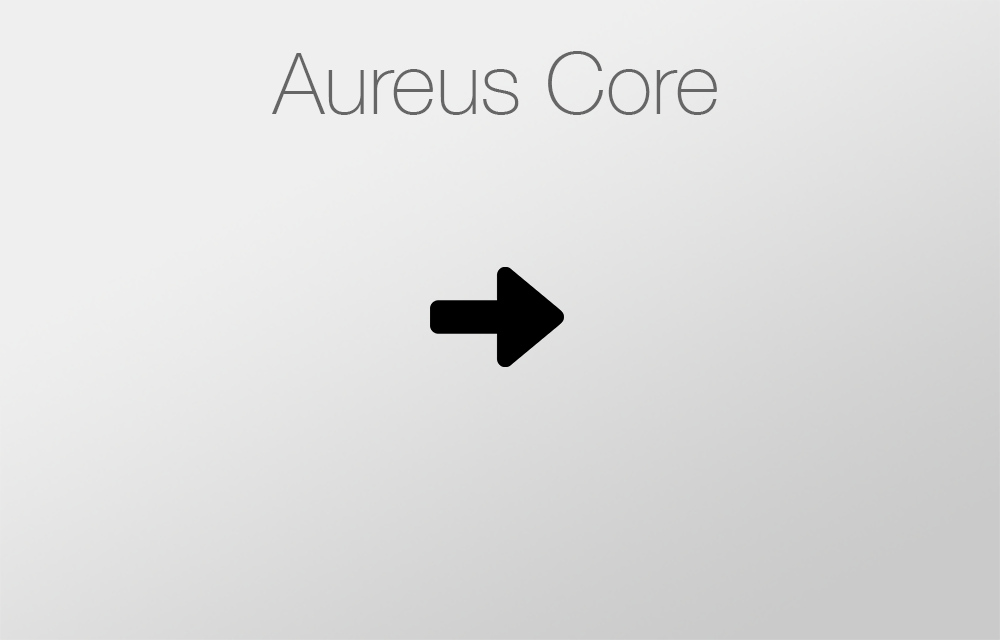
<style>
.page{position:relative;width:1000px;height:640px}
.page>*{position:absolute;margin:0}
.t1{font:85.7px "HelveticaNeue-Thin";color:#666666}
</style>
<div class="page">
<p class="t1" style="left:272px;top:51px;width:445px;height:64px">Aureus Core</p>
</div>
